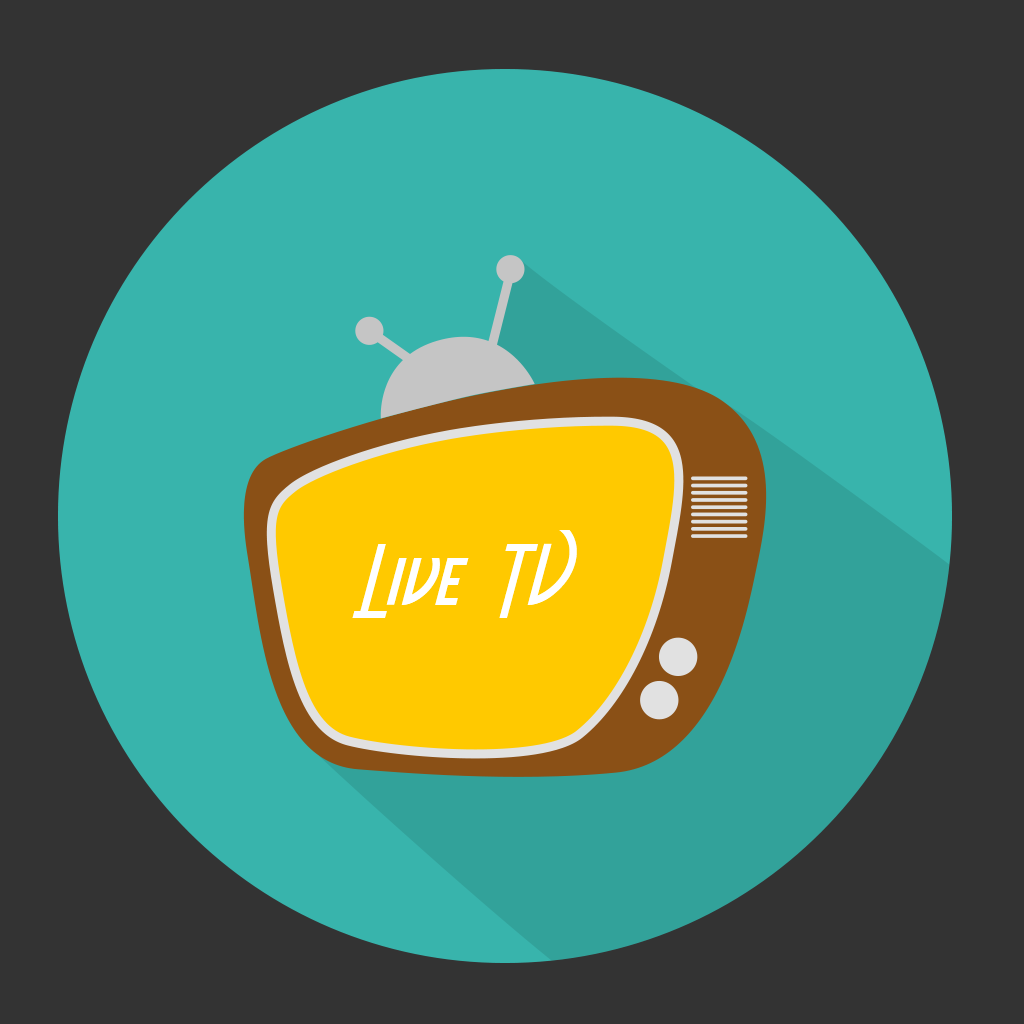
<style>
.page{position:relative;width:1024px;height:1024px;background:#333333}
.page>*{position:absolute;margin:0}
.t1{font:90px "AeroviasBrasilNF";letter-spacing:0.02em;color:#ffffff}
</style>
<div class="page">
<p class="t1" style="left:352px;top:530px;width:225px;height:88px">Live TV</p>
</div>
